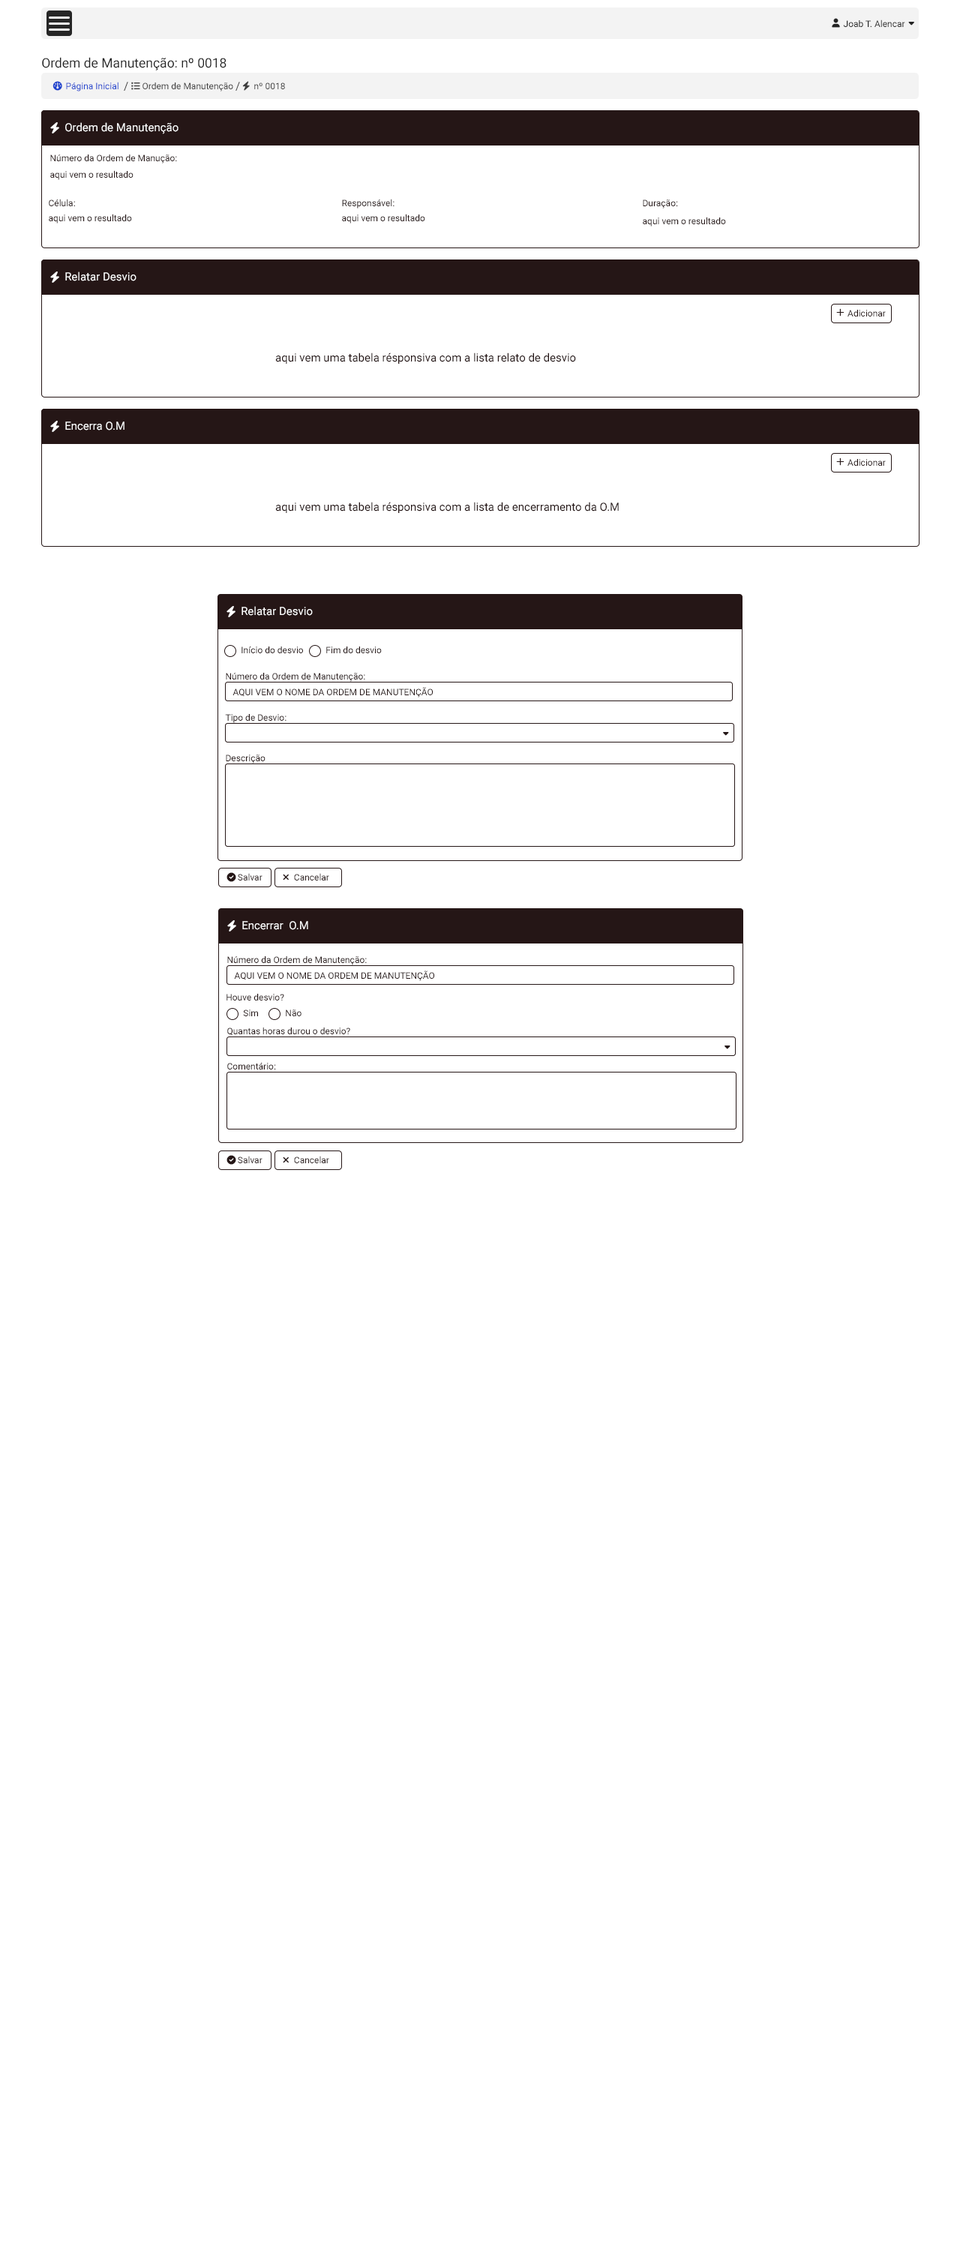
<style>
.page{position:relative;width:960px;height:2250px;background:#ffffff}
.page>*{position:absolute;margin:0}
.t1{font:9px "Roboto-Regular";color:#242424}
.t2{font:13.1px "Roboto-Regular";color:#242424}
.t3{font:9px "Roboto-Regular";color:#2044ce}
.t4{font:11.2px "Roboto-Regular";color:#3f3e3e}
.t5{font:9px "Roboto-Regular";color:#3f3e3e}
.t6{font:11.2px "Roboto-Regular";color:#ffffff}
.t7{font:9px "Roboto-Regular";color:#251616}
.t8{font:11.2px "Roboto-Regular";color:#251616}
</style>
<div class="page">
<p class="t1" style="left:843px;top:20px;width:62px;height:7px">Joab T. Alencar</p>
<p class="t2" style="left:42px;top:57px;width:184px;height:13px">Ordem de Manutenção: nº 0018</p>
<p class="t3" style="left:66px;top:82px;width:52px;height:10px">Página Inicial</p>
<p class="t4" style="left:124px;top:82px;width:4px;height:9px">/</p>
<p class="t5" style="left:142px;top:82px;width:91px;height:10px">Ordem de Manutenção</p>
<p class="t4" style="left:236px;top:82px;width:4px;height:9px">/</p>
<p class="t5" style="left:254px;top:82px;width:31px;height:7px">nº 0018</p>
<p class="t6" style="left:65px;top:122px;width:113px;height:12px">Ordem de Manutenção</p>
<p class="t7" style="left:50px;top:154px;width:127px;height:10px">Número da Ordem de Manução:</p>
<p class="t7" style="left:50px;top:170px;width:84px;height:10px">aqui vem o resultado</p>
<p class="t7" style="left:49px;top:199px;width:26px;height:7px">Célula:</p>
<p class="t7" style="left:342px;top:199px;width:52px;height:9px">Responsável:</p>
<p class="t7" style="left:643px;top:200px;width:35px;height:8px">Duração:</p>
<p class="t7" style="left:49px;top:214px;width:83px;height:10px">aqui vem o resultado</p>
<p class="t7" style="left:342px;top:214px;width:83px;height:10px">aqui vem o resultado</p>
<p class="t7" style="left:643px;top:217px;width:83px;height:9px">aqui vem o resultado</p>
<p class="t6" style="left:65px;top:272px;width:71px;height:9px">Relatar Desvio</p>
<p class="t7" style="left:848px;top:310px;width:38px;height:6px">Adicionar</p>
<p class="t8" style="left:275px;top:352px;width:301px;height:12px">aqui vem uma tabela résponsiva com a lista relato de desvio</p>
<p class="t6" style="left:65px;top:422px;width:59px;height:8px">Encerra O.M</p>
<p class="t7" style="left:848px;top:459px;width:38px;height:7px">Adicionar</p>
<p class="t8" style="left:275px;top:502px;width:344px;height:11px">aqui vem uma tabela résponsiva com a lista de encerramento da O.M</p>
<p class="t6" style="left:242px;top:606px;width:71px;height:10px">Relatar Desvio</p>
<p class="t7" style="left:242px;top:646px;width:61px;height:7px">Início do desvio</p>
<p class="t7" style="left:326px;top:646px;width:56px;height:7px">Fim do desvio</p>
<p class="t7" style="left:226px;top:673px;width:139px;height:9px">Número da Ordem de Manutenção:</p>
<p class="t7" style="left:232px;top:687px;width:201px;height:11px">AQUI VEM O NOME DA ORDEM DE MANUTENÇÃO</p>
<p class="t7" style="left:225px;top:714px;width:61px;height:9px">Tipo de Desvio:</p>
<p class="t7" style="left:226px;top:754px;width:40px;height:10px">Descrição</p>
<p class="t7" style="left:238px;top:873px;width:24px;height:7px">Salvar</p>
<p class="t7" style="left:294px;top:873px;width:35px;height:7px">Cancelar</p>
<p class="t6" style="left:242px;top:921px;width:66px;height:9px">Encerrar  O.M</p>
<p class="t7" style="left:227px;top:956px;width:140px;height:9px">Número da Ordem de Manutenção:</p>
<p class="t7" style="left:234px;top:970px;width:200px;height:11px">AQUI VEM O NOME DA ORDEM DE MANUTENÇÃO</p>
<p class="t7" style="left:226px;top:994px;width:58px;height:6px">Houve desvio?</p>
<p class="t7" style="left:243px;top:1010px;width:15px;height:6px">Sim</p>
<p class="t7" style="left:286px;top:1010px;width:16px;height:6px">Não</p>
<p class="t7" style="left:227px;top:1028px;width:123px;height:8px">Quantas horas durou o desvio?</p>
<p class="t7" style="left:227px;top:1063px;width:49px;height:7px">Comentário:</p>
<p class="t7" style="left:238px;top:1156px;width:24px;height:7px">Salvar</p>
<p class="t7" style="left:294px;top:1156px;width:35px;height:7px">Cancelar</p>
</div>
